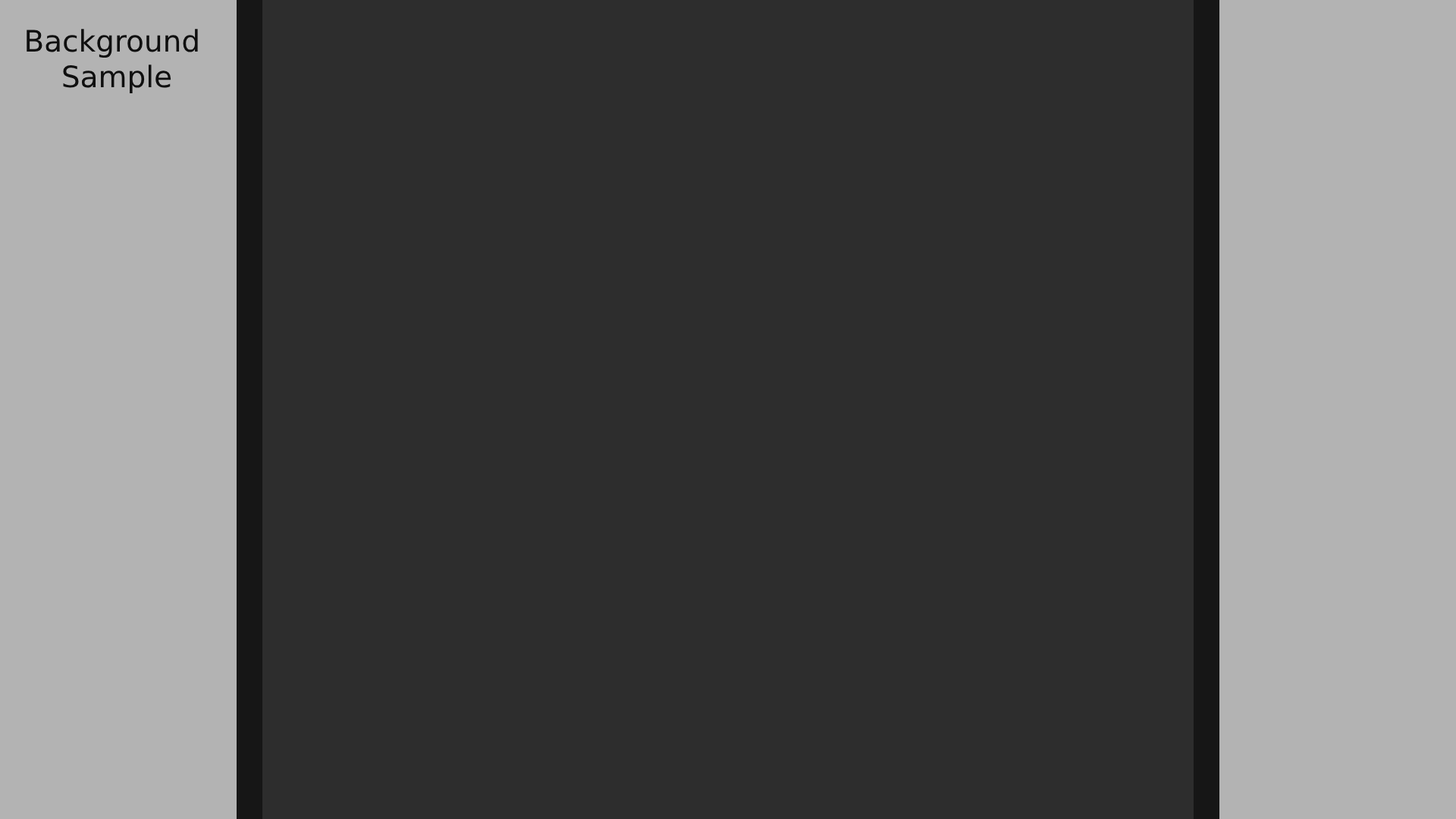
<style>
.page{position:relative;width:1456px;height:819px;background:#2d2d2d}
.page>*{position:absolute;margin:0}
.t1{font:29.6px "DejaVuSans";color:#0f0f0f}
</style>
<div class="page">
<p class="t1" style="left:27px;top:29px;width:171px;height:65px;text-align:center">Background <br>Sample</p>
</div>
